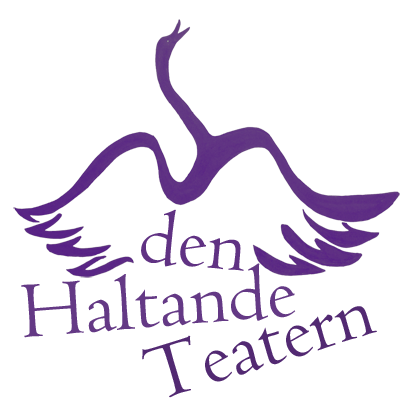
<style>
.page{position:relative;width:400px;height:418px;background:#ffffff}
.page>*{position:absolute;margin:0}
.t1{font:82px "Centaur";color:#603283}
.t2{font:82px "Centaur";color:#633984}
.t3{font:82px "Centaur";color:#512871}
</style>
<div class="page">
<p class="t1" style="left:141px;top:209px;width:103px;height:62px;rotate:5deg">den</p>
<p class="t2" style="left:21px;top:263px;width:275px;height:75px;rotate:-4deg">Haltande</p>
<p class="t3" style="left:142px;top:306px;width:235px;height:92px;rotate:-17deg">Teatern</p>
</div>
